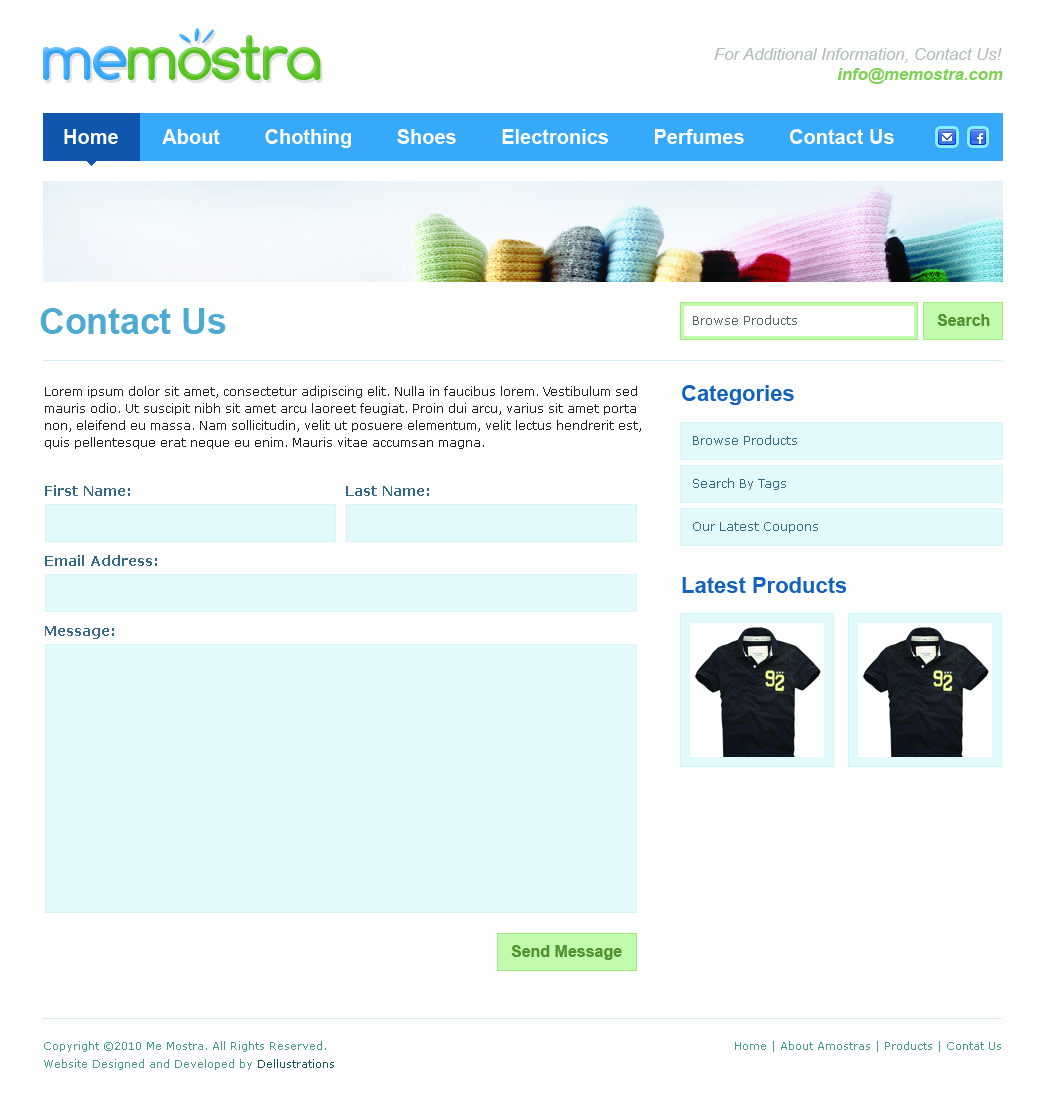
<style>
.page{position:relative;width:1047px;height:1097px;background:#ffffff}
.page>*{position:absolute;margin:0}
.t1{font:63.1px "Comfortaa-Bold";letter-spacing:-0.02em;color:#57c621}
.t2{font:63.1px "Comfortaa-Bold";letter-spacing:-0.02em;color:#37a9fa}
.t3{font:16.7px "Arial-ItalicMT";color:#b0bcbc}
.t4{font:16.7px "Arial-BoldItalicMT";color:#7dd254}
.t5{font:20px "Arial-BoldMT";color:#ffffff}
.t6{font:35.5px "Arial-BoldMT";color:#4daad3}
.t7{font:12px "Verdana";color:#536566}
.t8{font:16px "Arial-BoldMT";color:#50922d}
.t9{font:12px/17px "Verdana";color:#1b2021}
.t10{font:22px "Arial-BoldMT";color:#1363bd}
.t11{font:12px "Verdana";color:#336988}
.t12{font:14px "Verdana-Bold";color:#336988}
.t13{font:11px/18px "Verdana";color:#449f8c}
.t14{font:11px/18px "Verdana";color:#165852}
.t15{font:11px "Verdana";color:#449f8c}
</style>
<div class="page">
<p class="t1" style="left:43px;top:35px;width:278px;height:45px"><span class="t2">me</span>mostra</p>
<p class="t3" style="left:714px;top:48px;width:288px;height:15px">For Additional Information, Contact Us!</p>
<p class="t4" style="left:837px;top:68px;width:166px;height:16px">info@memostra.com</p>
<p class="t5" style="left:64px;top:129px;width:830px;height:19px">Home        About        Chothing        Shoes        Electronics        Perfumes        Contact Us</p>
<p class="t6" style="left:40px;top:308px;width:186px;height:26px">Contact Us</p>
<p class="t7" style="left:693px;top:315px;width:104px;height:10px">Browse Products</p>
<p class="t8" style="left:937px;top:314px;width:53px;height:12px">Search</p>
<p class="t9" style="left:45px;top:386px;width:596px;height:63px">Lorem ipsum dolor sit amet, consectetur adipiscing elit. Nulla in faucibus lorem. Vestibulum sed mauris odio. Ut suscipit nibh sit amet arcu laoreet feugiat. Proin dui arcu, varius sit amet porta non, eleifend eu massa. Nam sollicitudin, velit ut posuere elementum, velit lectus hendrerit est, quis pellentesque erat neque eu enim. Mauris vitae accumsan magna.</p>
<p class="t10" style="left:682px;top:385px;width:112px;height:20px">Categories</p>
<p class="t11" style="left:693px;top:435px;width:104px;height:10px">Browse Products</p>
<p class="t12" style="left:45px;top:485px;width:85px;height:11px">First Name:</p>
<p class="t12" style="left:346px;top:486px;width:83px;height:10px">Last Name:</p>
<p class="t11" style="left:693px;top:478px;width:93px;height:12px">Search By Tags</p>
<p class="t11" style="left:693px;top:522px;width:125px;height:11px">Our Latest Coupons</p>
<p class="t12" style="left:45px;top:555px;width:112px;height:11px">Email Address:</p>
<p class="t10" style="left:682px;top:577px;width:165px;height:16px">Latest Products</p>
<p class="t12" style="left:45px;top:626px;width:69px;height:13px">Message:</p>
<p class="t8" style="left:511px;top:945px;width:111px;height:15px">Send Message</p>
<p class="t13" style="left:44px;top:1041px;width:290px;height:29px">Copyright ©2010 Me Mostra. All Rights Reserved.<br>Website Designed and Developed by <span class="t14">Dellustrations</span></p>
<p class="t15" style="left:735px;top:1041px;width:266px;height:11px">Home | About Amostras | Products | Contat Us</p>
</div>
